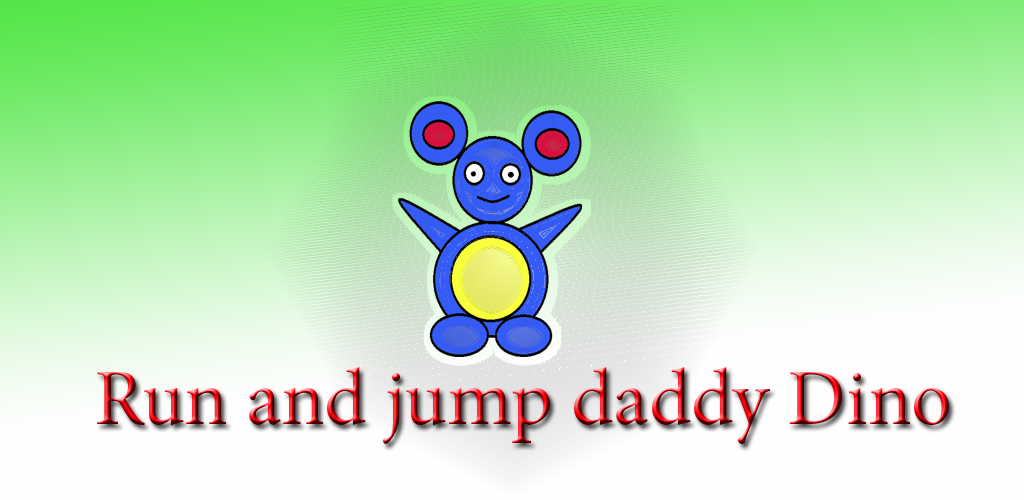
<style>
.page{position:relative;width:1024px;height:500px}
.page>*{position:absolute;margin:0}
.t1{font:96px "MinionPro-Regular"}
.t2{font:80px "MinionPro-Regular"}
</style>
<div class="page">
<p class="t1" style="left:97px;top:367px;width:852px;height:77px"><span class="t2">Run and jump daddy Dino<br><br></span><br>Dino, run<br><br>run daddy dino, run</p>
</div>
